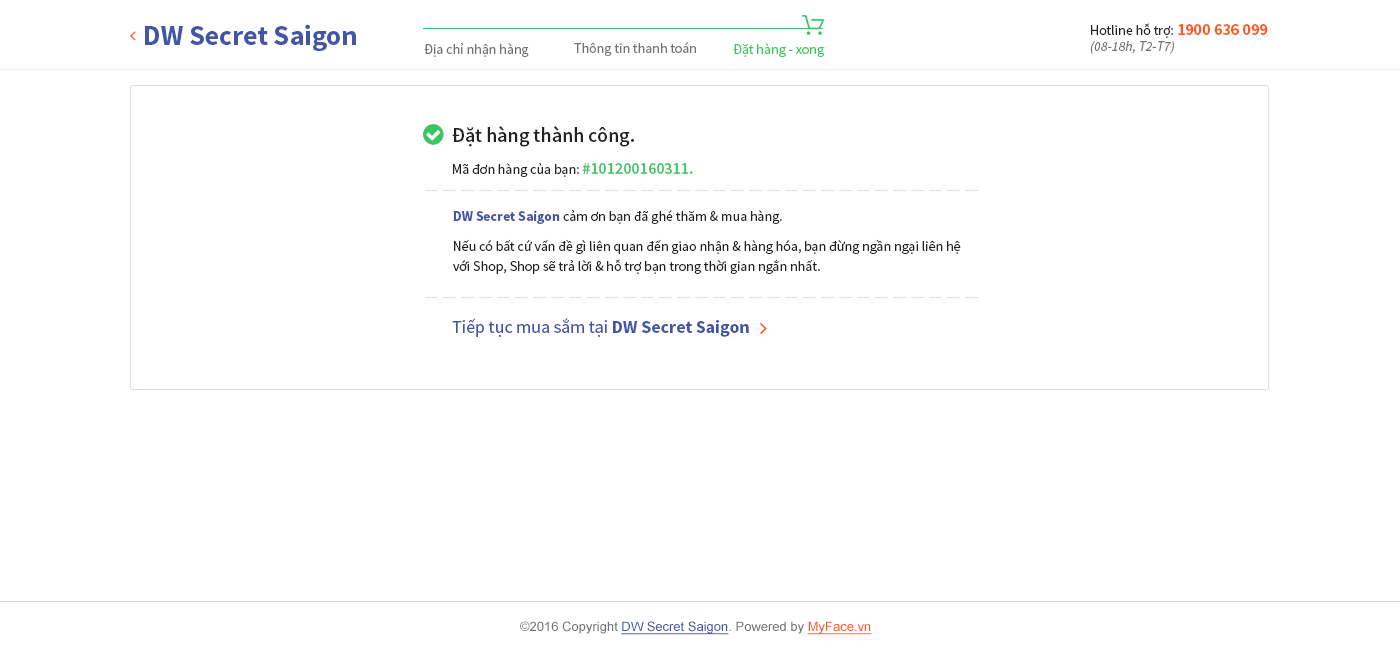
<style>
.page{position:relative;width:1400px;height:650px;background:#ffffff}
.page>*{position:absolute;margin:0}
.t1{font:28px "SourceSansPro-Bold";color:#4355a5}
.t2{font:14px "SourceSansPro-Regular";color:#212121}
.t3{font:16px "SourceSansPro-Bold";color:#ff5722}
.t4{font:14px "SourceSansPro-It";color:#727272}
.t5{font:14px "SourceSansPro-Regular";color:#727272}
.t6{font:14px "SourceSansPro-Regular";color:#3ac562}
.t7{font:20px "SourceSansPro-Semibold";color:#212121}
.t8{font:16px "SourceSansPro-Semibold";color:#3ac562}
.t9{font:14px "SourceSansPro-Bold";color:#4355a5}
.t10{font:14px/20px "SourceSansPro-Regular";color:#212121}
.t11{font:18px "SourceSansPro-Regular";color:#4355a5}
.t12{font:18px "SourceSansPro-Bold";color:#4355a5}
.t13{font:13px "ArialMT";color:#4355a5;text-decoration:underline}
.t14{font:13px "ArialMT";color:#727272}
.t15{font:13px "ArialMT";color:#ff5722;text-decoration:underline}
</style>
<div class="page">
<p class="t1" style="left:145px;top:24px;width:211px;height:27px">DW Secret Saigon</p>
<p class="t2" style="left:1091px;top:23px;width:177px;height:15px">Hotline hỗ trợ: <span class="t3">1900 636 099</span></p>
<p class="t4" style="left:1090px;top:41px;width:84px;height:13px">(08-18h, T2-T7)</p>
<p class="t5" style="left:424px;top:43px;width:105px;height:14px">Địa chỉ nhận hàng</p>
<p class="t5" style="left:574px;top:42px;width:122px;height:14px">Thông tin thanh toán</p>
<p class="t6" style="left:733px;top:43px;width:91px;height:14px">Đặt hàng - xong</p>
<p class="t7" style="left:452px;top:126px;width:182px;height:21px">Đặt hàng thành công.</p>
<p class="t2" style="left:453px;top:163px;width:240px;height:14px">Mã đơn hàng của bạn: <span class="t8">#101200160311.</span></p>
<p class="t2" style="left:453px;top:210px;width:329px;height:14px"><span class="t9">DW Secret Saigon</span> cảm ơn bạn đã ghé thăm &amp; mua hàng.</p>
<p class="t10" style="left:453px;top:239px;width:508px;height:35px">Nếu có bất cứ vấn đề gì liên quan đến giao nhận &amp; hàng hóa, bạn đừng ngần ngại liên hệ với Shop, Shop sẽ trả lời &amp; hỗ trợ bạn trong thời gian ngắn nhất.</p>
<p class="t11" style="left:452px;top:318px;width:297px;height:19px">Tiếp tục mua sắm tại<span class="t12"> DW Secret Saigon</span></p>
<p class="t13" style="left:520px;top:621px;width:352px;height:14px"><span class="t14">©2016 Copyright </span>DW Secret Saigon<span class="t14">. Powered by </span><span class="t15">MyFace.vn</span></p>
</div>
